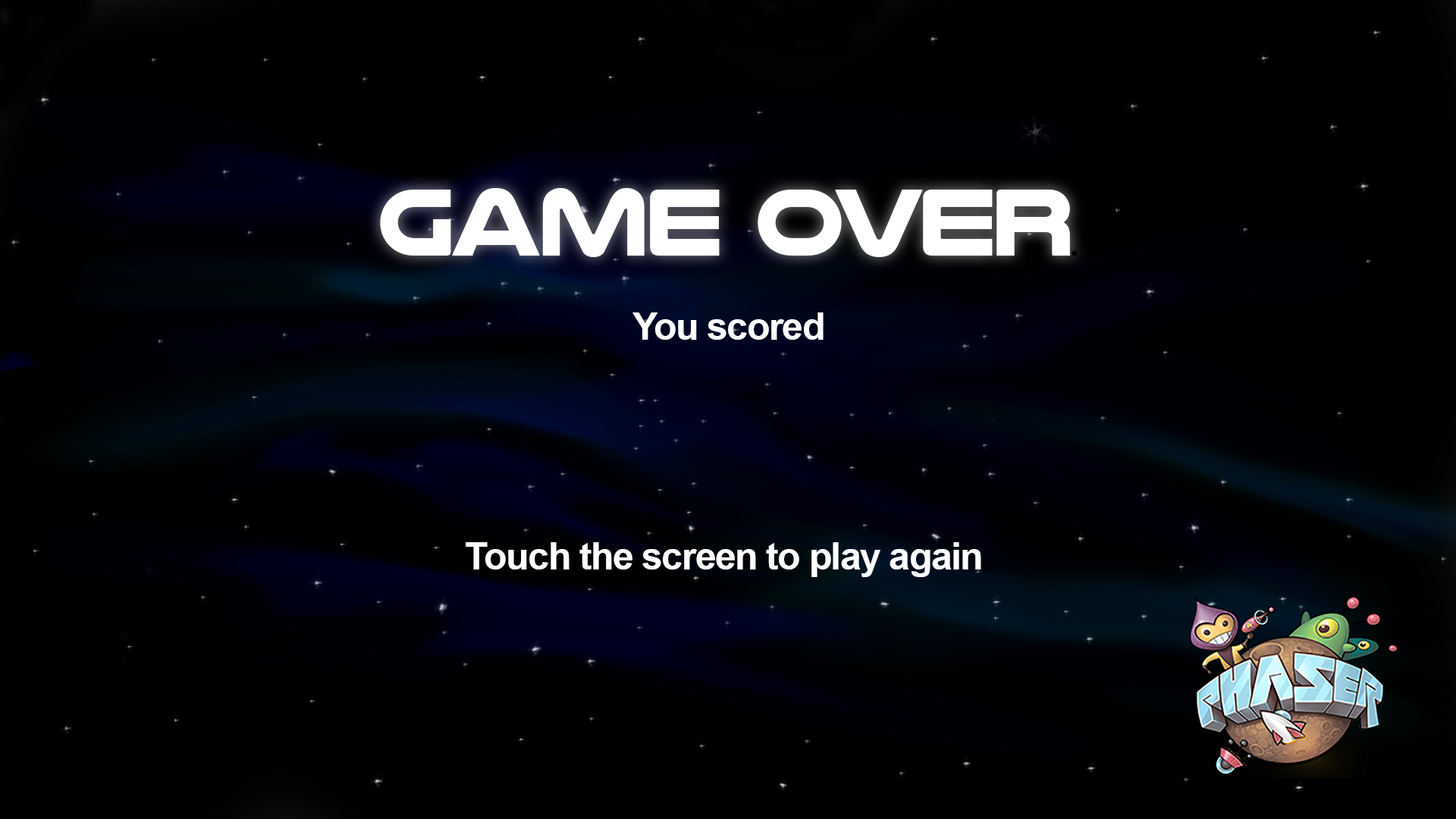
<style>
.page{position:relative;width:1456px;height:819px;background:#000000}
.page>*{position:absolute;margin:0}
.t1{font:97.1px "NulshockRg-Bold";letter-spacing:-0.035em;color:#ffffff}
.t2{font:32.8px "Arial-BoldMT";letter-spacing:-0.035em;color:#000000}
.t3{font:38.2px "Arial-BoldMT";letter-spacing:-0.035em;color:#ffffff}
.t4{font:38.2px "Arial-BoldMT";letter-spacing:-0.035em;color:#000000}
</style>
<div class="page">
<p class="t1" style="left:380px;top:188px;width:697px;height:69px">GAME OVER<span class="t2">.</span></p>
<p class="t3" style="left:466px;top:312px;width:524px;height:265px;text-align:center">You scored<br><br><br><br><br>Touch the screen to play again<span class="t4">.</span></p>
</div>
